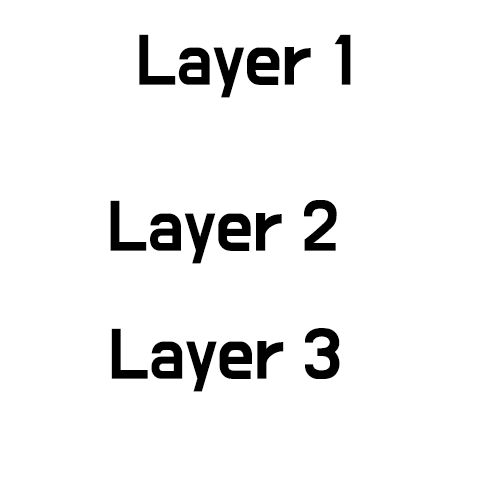
<style>
.page{position:relative;width:500px;height:500px;background:#ffffff}
.page>*{position:absolute;margin:0}
.t1{font:58.3px "BMDoHyeon";color:#000000}
</style>
<div class="page">
<p class="t1" style="left:139px;top:34px;width:212px;height:64px">Layer 1</p>
<p class="t1" style="left:110px;top:200px;width:227px;height:64px">Layer 2</p>
<p class="t1" style="left:111px;top:328px;width:229px;height:64px">Layer 3</p>
</div>
